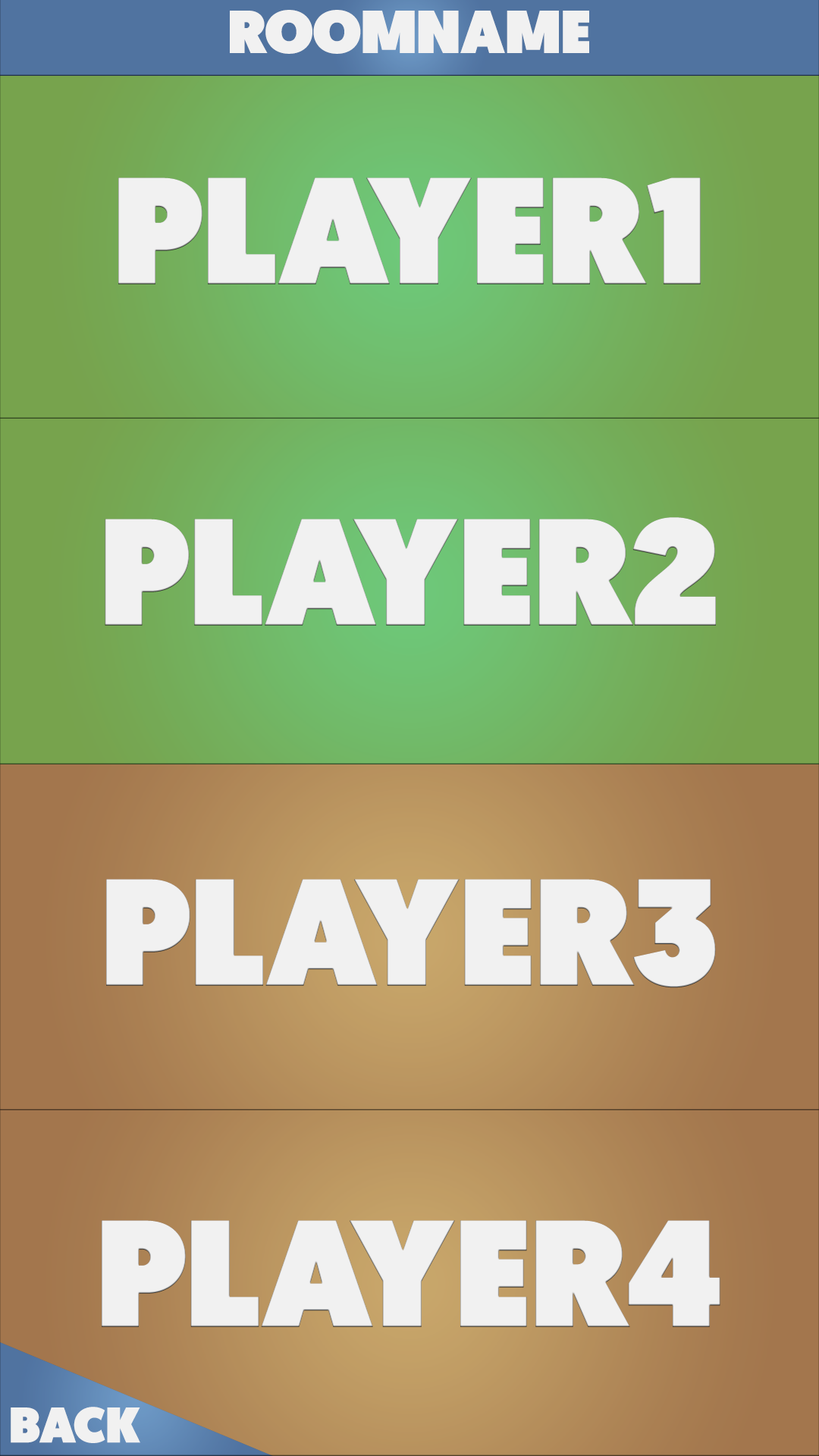
<style>
.page{position:relative;width:819px;height:1456px}
.page>*{position:absolute;margin:0}
.t1{font:60.7px "Geomanist-Ultra";color:#f1f1f1}
.t2{font:151.7px "Geomanist-Ultra";color:#f1f1f1}
.t3{font:50px "Geomanist-Ultra";color:#f1f1f1}
</style>
<div class="page">
<p class="t1" style="left:230px;top:10px;width:359px;height:44px">ROOMNAME</p>
<p class="t2" style="left:118px;top:177px;width:583px;height:107px">PLAYER1</p>
<p class="t2" style="left:105px;top:517px;width:611px;height:109px">PLAYER2</p>
<p class="t2" style="left:106px;top:879px;width:610px;height:109px">PLAYER3</p>
<p class="t2" style="left:102px;top:1220px;width:618px;height:107px">PLAYER4</p>
<p class="t3" style="left:11px;top:1407px;width:129px;height:36px">BACK</p>
</div>
